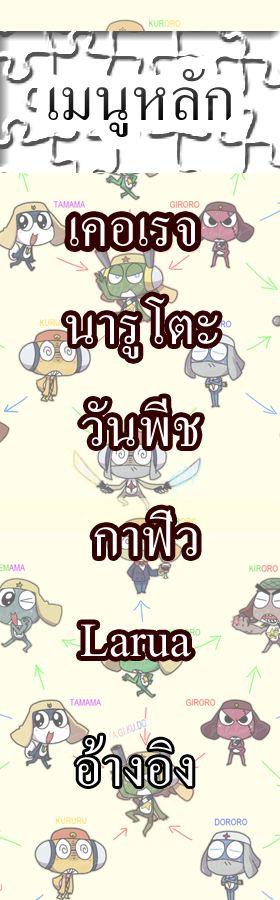
<style>
.page{position:relative;width:280px;height:900px;background:#fffeea}
.page>*{position:absolute;margin:0}
.t1{font:82px "AngsanaNew"}
.t2{font:72px "AngsanaNew";color:#ffffff}
</style>
<div class="page">
<p class="t1" style="left:48px;top:69px;width:183px;height:68px">เมนููหลัก</p>
<p class="t2" style="left:70px;top:217px;width:125px;height:29px">เคอเรจ</p>
<p class="t2" style="left:66px;top:296px;width:152px;height:63px">นารูโตะ</p>
<p class="t2" style="left:82px;top:398px;width:118px;height:48px">วันพีช</p>
<p class="t2" style="left:94px;top:509px;width:103px;height:47px">กาฟิว</p>
<p class="t2" style="left:81px;top:624px;width:110px;height:33px">Larua</p>
<p class="t2" style="left:76px;top:735px;width:117px;height:51px">อ้างอิง</p>
</div>
